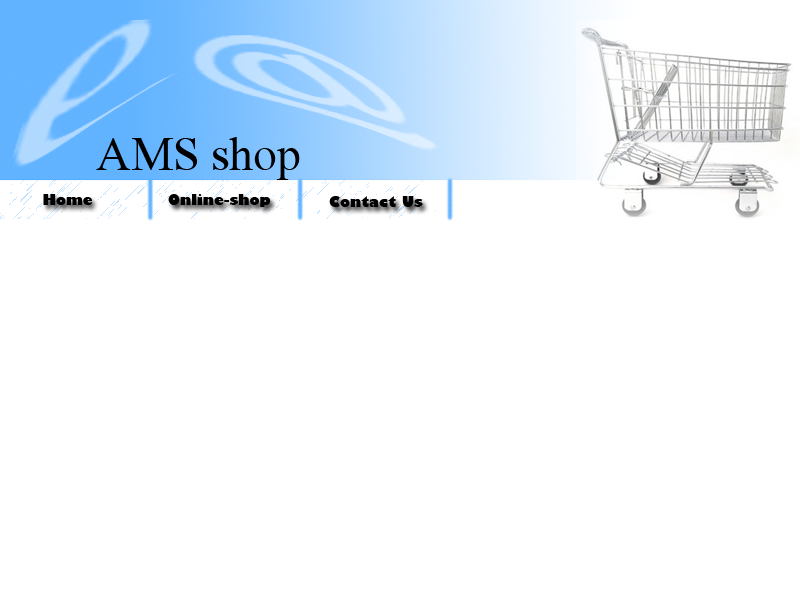
<style>
.page{position:relative;width:800px;height:600px;background:#ffffff}
.page>*{position:absolute;margin:0}
.t1{font:48px "David";color:#000000}
.t2{font:14px "TrumaniaEEN";color:#000000}
</style>
<div class="page">
<p class="t1" style="left:96px;top:137px;width:204px;height:43px">AMS shop</p>
<p class="t2" style="left:43px;top:194px;width:49px;height:11px">Home</p>
<p class="t2" style="left:168px;top:194px;width:103px;height:13px">Online-shop</p>
<p class="t2" style="left:329px;top:196px;width:94px;height:11px">Contact Us</p>
</div>
